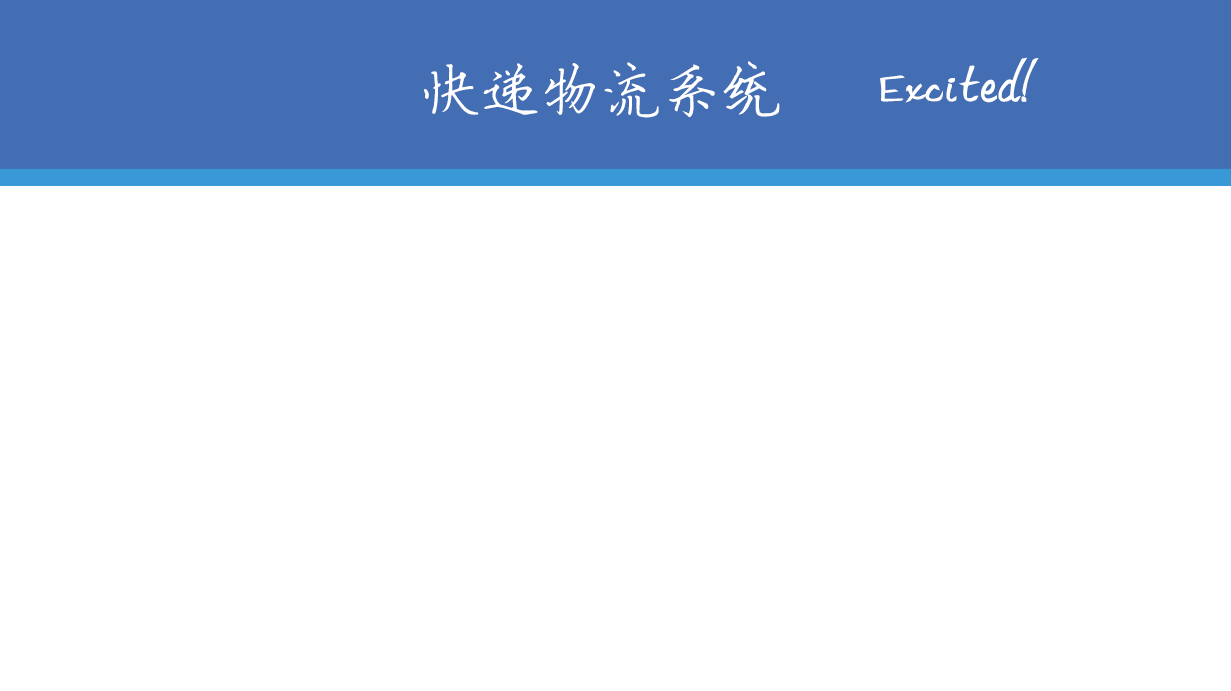
<style>
.page{position:relative;width:1231px;height:691px;background:#ffffff}
.page>*{position:absolute;margin:0}
.t1{font:60px "FZYBKSJW--GB1-0";color:#ffffff}
.t2{font:60px "FZQTJW--GB1-0";color:#ffffff}
</style>
<div class="page">
<p class="t1" style="left:424px;top:61px;width:356px;height:57px">快递物流系统</p>
<p class="t2" style="left:880px;top:57px;width:159px;height:46px">Excited!</p>
</div>
